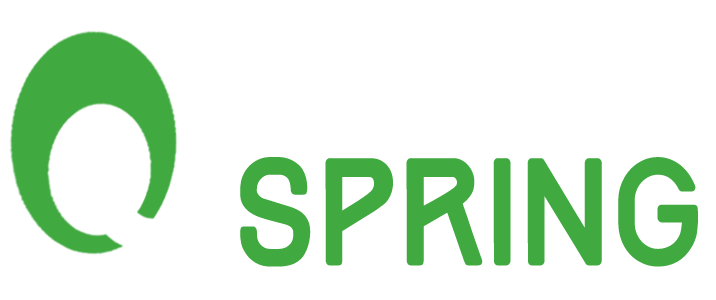
<style>
.page{position:relative;width:716px;height:300px;background:#ffffff}
.page>*{position:absolute;margin:0}
.t1{font:132.6px "Track";color:#40a940;font-weight:bold;scale:0.91 1}
</style>
<div class="page">
<p class="t1" style="left:240px;top:157px;width:458px;height:110px">spring</p>
</div>
